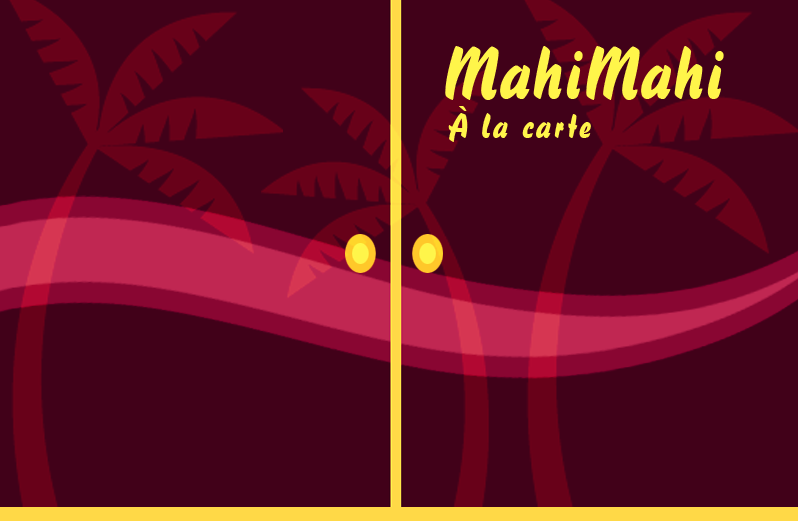
<style>
.page{position:relative;width:798px;height:521px;background:#410119}
.page>*{position:absolute;margin:0}
.t1{font:72px "Brush738BT-RegularA";color:#fff54a}
.t2{font:35px "Brush738BT-RegularA";letter-spacing:0.065em;color:#fff54a}
</style>
<div class="page">
<p class="t1" style="left:445px;top:46px;width:279px;height:54px">MahiMahi</p>
<p class="t2" style="left:448px;top:106px;width:143px;height:36px">À la carte</p>
</div>
